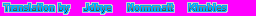
<style>
.page{position:relative;width:256px;height:16px;background:#ff00ff}
.page>*{position:absolute;margin:0}
.t1{font:10px "ArialMT"}
</style>
<div class="page">
<p class="t1" style="left:4px;top:4px;width:222px;height:9px">Translation by     Jdbye     Normmatt     Kimbles</p>
</div>
